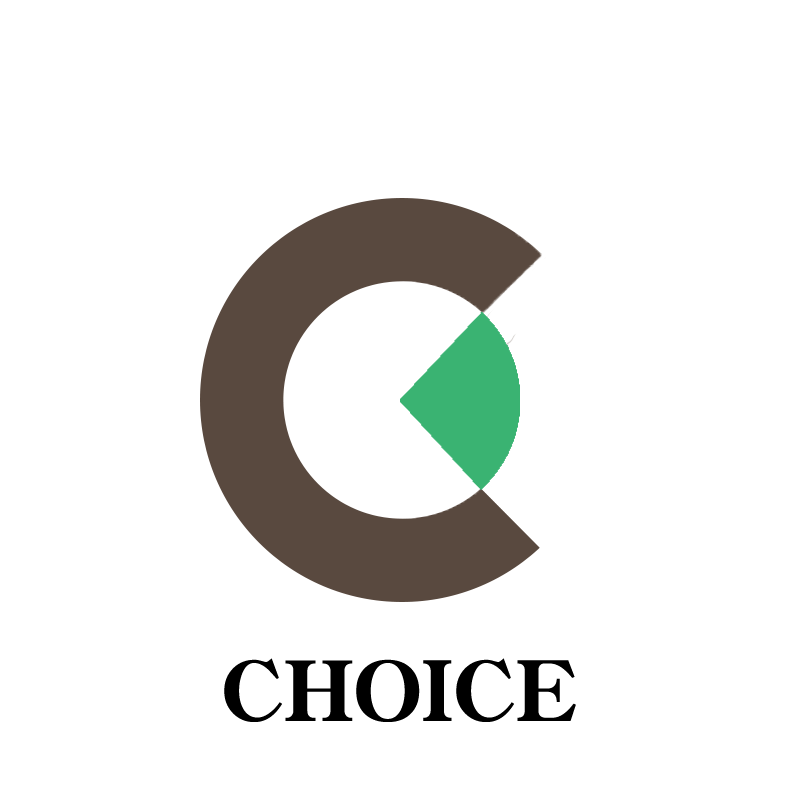
<style>
.page{position:relative;width:800px;height:800px;background:#ffffff}
.page>*{position:absolute;margin:0}
.t1{font:83.3px "DFMincho-UB-WING-RKSJ-H";color:#000000}
</style>
<div class="page">
<p class="t1" style="left:224px;top:658px;width:352px;height:64px">CHOICE</p>
</div>
